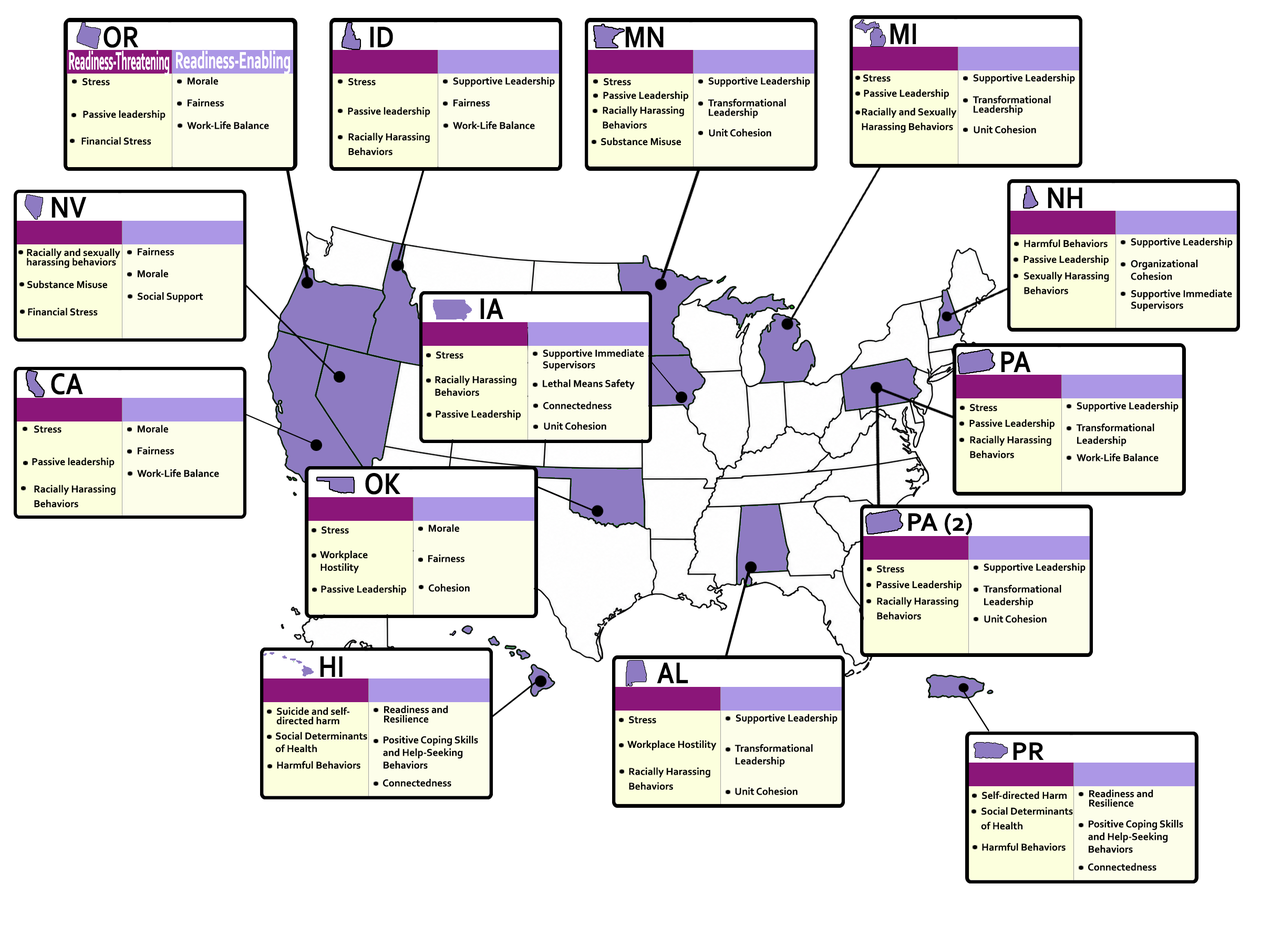
<style>
.page{position:relative;width:1261px;height:946px;background:#ffffff}
.page>*{position:absolute;margin:0}
.t1{font:31.5px "Corbel-Bold";color:#000000;scale:0.85 1}
.t2{font:26.1px "Corbel-Bold";color:#ffffff;scale:0.39 1}
.t3{font:24.5px "Corbel-Bold";color:#ffffff;scale:0.56 1}
.t4{font:10.5px "Corbel-Bold";color:#000000}
.t5{font:10.5px/9.5px "Corbel-Bold";color:#000000}
.t6{font:10.5px/7.4px "Corbel-Bold";color:#000000}
.t7{font:10.5px/12.6px "Corbel-Bold";color:#000000}
.t8{font:10.5px/5.8px "Corbel-Bold";color:#000000}
.t9{font:10.5px/11.6px "Corbel-Bold";color:#000000}
.t10{font:10.5px/6.3px "Corbel-Bold";color:#000000}
.t11{font:26.8px "Corbel-Bold";color:#000000}
</style>
<div class="page">
<p class="t1" style="left:104px;top:26px;width:35px;height:22px">OR</p>
<p class="t1" style="left:370px;top:26px;width:23px;height:21px">ID</p>
<p class="t1" style="left:625px;top:26px;width:39px;height:21px">MN</p>
<p class="t1" style="left:890px;top:23px;width:26px;height:21px">MI</p>
<p class="t2" style="left:69px;top:50px;width:100px;height:26px">Readiness-Threatening</p>
<p class="t2" style="left:69px;top:50px;width:100px;height:26px">Readiness-Threatening</p>
<p class="t3" style="left:176px;top:50px;width:114px;height:24px">Readiness-Enabling</p>
<p class="t3" style="left:176px;top:50px;width:114px;height:24px">Readiness-Enabling</p>
<p class="t4" style="left:82px;top:78px;width:28px;height:8px">Stress</p>
<p class="t4" style="left:188px;top:77px;width:30px;height:8px">Morale</p>
<p class="t4" style="left:348px;top:78px;width:28px;height:8px">Stress</p>
<p class="t4" style="left:453px;top:77px;width:102px;height:10px">Supportive Leadership</p>
<p class="t4" style="left:604px;top:78px;width:27px;height:8px">Stress</p>
<p class="t4" style="left:708px;top:77px;width:102px;height:10px">Supportive Leadership</p>
<p class="t4" style="left:863px;top:74px;width:28px;height:8px">Stress</p>
<p class="t4" style="left:973px;top:74px;width:102px;height:10px">Supportive Leadership</p>
<p class="t4" style="left:864px;top:89px;width:85px;height:10px">Passive Leadership</p>
<p class="t4" style="left:188px;top:99px;width:36px;height:8px">Fairness</p>
<p class="t4" style="left:453px;top:99px;width:37px;height:8px">Fairness</p>
<p class="t4" style="left:603px;top:91px;width:85px;height:10px">Passive Leadership</p>
<p class="t5" style="left:708px;top:98px;width:78px;height:20px">Transformational<br>Leadership</p>
<p class="t5" style="left:972px;top:95px;width:79px;height:20px">Transformational<br>Leadership</p>
<p class="t4" style="left:83px;top:110px;width:82px;height:10px">Passive leadership</p>
<p class="t4" style="left:348px;top:107px;width:82px;height:10px">Passive leadership</p>
<p class="t6" style="left:603px;top:106px;width:81px;height:23px">Racially Harassing<br><br>Behaviors</p>
<p class="t6" style="left:862px;top:108px;width:95px;height:25px">Racially and Sexually<br><br>Harassing Behaviors</p>
<p class="t4" style="left:187px;top:121px;width:82px;height:8px">Work-Life Balance</p>
<p class="t4" style="left:453px;top:121px;width:82px;height:8px">Work-Life Balance</p>
<p class="t4" style="left:974px;top:126px;width:62px;height:7px">Unit Cohesion</p>
<p class="t4" style="left:81px;top:137px;width:70px;height:8px">Financial Stress</p>
<p class="t6" style="left:348px;top:132px;width:82px;height:24px">Racially Harassing<br><br>Behaviors</p>
<p class="t4" style="left:601px;top:137px;width:80px;height:9px">Substance Misuse</p>
<p class="t4" style="left:709px;top:129px;width:62px;height:8px">Unit Cohesion</p>
<p class="t1" style="left:51px;top:196px;width:36px;height:22px">NV</p>
<p class="t1" style="left:1048px;top:187px;width:34px;height:21px">NH</p>
<p class="t4" style="left:1024px;top:239px;width:84px;height:8px">Harmful Behaviors</p>
<p class="t4" style="left:1131px;top:237px;width:102px;height:11px">Supportive Leadership</p>
<p class="t5" style="left:27px;top:248px;width:93px;height:20px">Racially and sexually <br>harassing behaviors</p>
<p class="t4" style="left:138px;top:247px;width:36px;height:8px">Fairness</p>
<p class="t4" style="left:1023px;top:255px;width:86px;height:10px">Passive Leadership</p>
<p class="t4" style="left:138px;top:270px;width:30px;height:7px">Morale</p>
<p class="t7" style="left:1131px;top:260px;width:67px;height:20px">Organizational<br>Cohesion</p>
<p class="t4" style="left:27px;top:280px;width:80px;height:8px">Substance Misuse</p>
<p class="t6" style="left:1024px;top:272px;width:85px;height:22px">Sexually Harassing <br><br>Behaviors</p>
<p class="t4" style="left:138px;top:292px;width:65px;height:10px">Social Support</p>
<p class="t8" style="left:1131px;top:289px;width:101px;height:22px">Supportive Immediate<br><br>Supervisors</p>
<p class="t1" style="left:480px;top:298px;width:23px;height:21px">IA</p>
<p class="t4" style="left:28px;top:307px;width:70px;height:9px">Financial Stress</p>
<p class="t4" style="left:436px;top:351px;width:27px;height:8px">Stress</p>
<p class="t9" style="left:543px;top:349px;width:101px;height:22px">Supportive Immediate<br>Supervisors</p>
<p class="t1" style="left:1001px;top:351px;width:30px;height:21px">PA</p>
<p class="t1" style="left:51px;top:373px;width:32px;height:22px">CA</p>
<p class="t10" style="left:435px;top:375px;width:81px;height:21px">Racially Harassing<br><br>Behaviors</p>
<p class="t4" style="left:543px;top:379px;width:92px;height:10px">Lethal Means Safety</p>
<p class="t4" style="left:543px;top:401px;width:69px;height:8px">Connectedness</p>
<p class="t4" style="left:1077px;top:401px;width:101px;height:11px">Supportive Leadership</p>
<p class="t4" style="left:436px;top:410px;width:85px;height:10px">Passive Leadership</p>
<p class="t4" style="left:970px;top:403px;width:27px;height:8px">Stress</p>
<p class="t4" style="left:34px;top:425px;width:27px;height:8px">Stress</p>
<p class="t4" style="left:138px;top:425px;width:30px;height:7px">Morale</p>
<p class="t4" style="left:544px;top:422px;width:62px;height:8px">Unit Cohesion</p>
<p class="t4" style="left:969px;top:419px;width:85px;height:10px">Passive Leadership</p>
<p class="t7" style="left:1076px;top:423px;width:78px;height:23px">Transformational<br>Leadership</p>
<p class="t6" style="left:970px;top:436px;width:81px;height:22px">Racially Harassing <br><br>Behaviors</p>
<p class="t4" style="left:138px;top:447px;width:36px;height:7px">Fairness</p>
<p class="t4" style="left:32px;top:457px;width:83px;height:11px">Passive leadership</p>
<p class="t4" style="left:1077px;top:453px;width:81px;height:8px">Work-Life Balance</p>
<p class="t4" style="left:137px;top:469px;width:82px;height:8px">Work-Life Balance</p>
<p class="t1" style="left:365px;top:473px;width:35px;height:21px">OK</p>
<p class="t6" style="left:34px;top:484px;width:82px;height:24px">Racially Harassing<br><br>Behaviors</p>
<p class="t11" style="left:908px;top:512px;width:64px;height:23px">PA (2)</p>
<p class="t4" style="left:322px;top:526px;width:27px;height:8px">Stress</p>
<p class="t4" style="left:429px;top:524px;width:30px;height:8px">Morale</p>
<p class="t10" style="left:320px;top:550px;width:48px;height:23px">Workplace<br><br>Hostility</p>
<p class="t4" style="left:428px;top:554px;width:36px;height:8px">Fairness</p>
<p class="t4" style="left:877px;top:565px;width:27px;height:8px">Stress</p>
<p class="t4" style="left:984px;top:563px;width:101px;height:10px">Supportive Leadership</p>
<p class="t4" style="left:876px;top:580px;width:85px;height:11px">Passive Leadership</p>
<p class="t4" style="left:321px;top:585px;width:85px;height:10px">Passive Leadership</p>
<p class="t4" style="left:428px;top:584px;width:42px;height:8px">Cohesion</p>
<p class="t7" style="left:983px;top:584px;width:78px;height:23px">Transformational<br>Leadership</p>
<p class="t6" style="left:877px;top:597px;width:81px;height:22px">Racially Harassing <br><br>Behaviors</p>
<p class="t4" style="left:984px;top:615px;width:63px;height:8px">Unit Cohesion</p>
<p class="t1" style="left:320px;top:656px;width:23px;height:21px">HI</p>
<p class="t1" style="left:657px;top:662px;width:31px;height:21px">AL</p>
<p class="t5" style="left:276px;top:707px;width:73px;height:18px">Suicide and self-<br>directed harm</p>
<p class="t5" style="left:384px;top:705px;width:64px;height:17px">Readiness and <br>Resilience</p>
<p class="t4" style="left:736px;top:713px;width:101px;height:11px">Supportive Leadership</p>
<p class="t4" style="left:629px;top:716px;width:27px;height:7px">Stress</p>
<p class="t10" style="left:275px;top:731px;width:92px;height:21px">Social Determinants<br><br>of Health</p>
<p class="t7" style="left:383px;top:736px;width:95px;height:33px">Positive Coping Skills<br>and Help-Seeking<br>Behaviors</p>
<p class="t4" style="left:627px;top:740px;width:90px;height:10px">Workplace Hostility</p>
<p class="t7" style="left:734px;top:743px;width:79px;height:24px">Transformational<br>Leadership</p>
<p class="t11" style="left:1013px;top:742px;width:31px;height:18px">PR</p>
<p class="t4" style="left:277px;top:761px;width:83px;height:8px">Harmful Behaviors</p>
<p class="t6" style="left:629px;top:767px;width:81px;height:23px">Racially Harassing<br><br>Behaviors</p>
<p class="t4" style="left:382px;top:779px;width:69px;height:7px">Connectedness</p>
<p class="t4" style="left:735px;top:787px;width:63px;height:8px">Unit Cohesion</p>
<p class="t4" style="left:982px;top:791px;width:85px;height:8px">Self-directed Harm</p>
<p class="t5" style="left:1089px;top:789px;width:64px;height:17px">Readiness and <br>Resilience</p>
<p class="t6" style="left:981px;top:806px;width:92px;height:24px">Social Determinants<br><br>of Health</p>
<p class="t7" style="left:1088px;top:820px;width:95px;height:33px">Positive Coping Skills<br>and Help-Seeking<br>Behaviors</p>
<p class="t4" style="left:982px;top:843px;width:83px;height:8px">Harmful Behaviors</p>
<p class="t4" style="left:1088px;top:863px;width:68px;height:8px">Connectedness</p>
</div>
